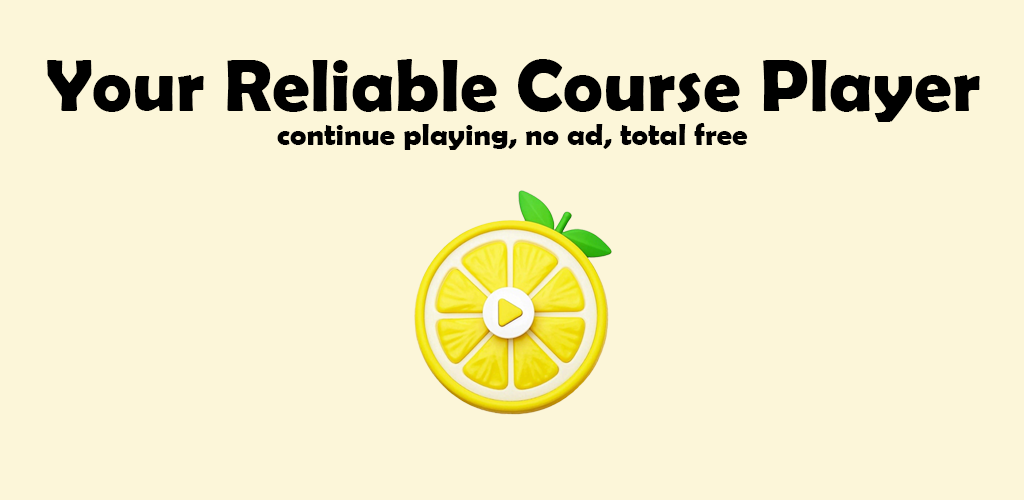
<style>
.page{position:relative;width:1024px;height:500px;background:#fcf6d9}
.page>*{position:absolute;margin:0}
.t1{font:75.5px "BerlinSansFBDemi-Bold";color:#000000}
.t2{font:31px "BerlinSansFBDemi-Bold";color:#000000}
</style>
<div class="page">
<p class="t1" style="left:47px;top:59px;width:933px;height:63px">Your Reliable Course Player</p>
<p class="t2" style="left:277px;top:123px;width:471px;height:27px">continue playing, no ad, total free</p>
</div>
